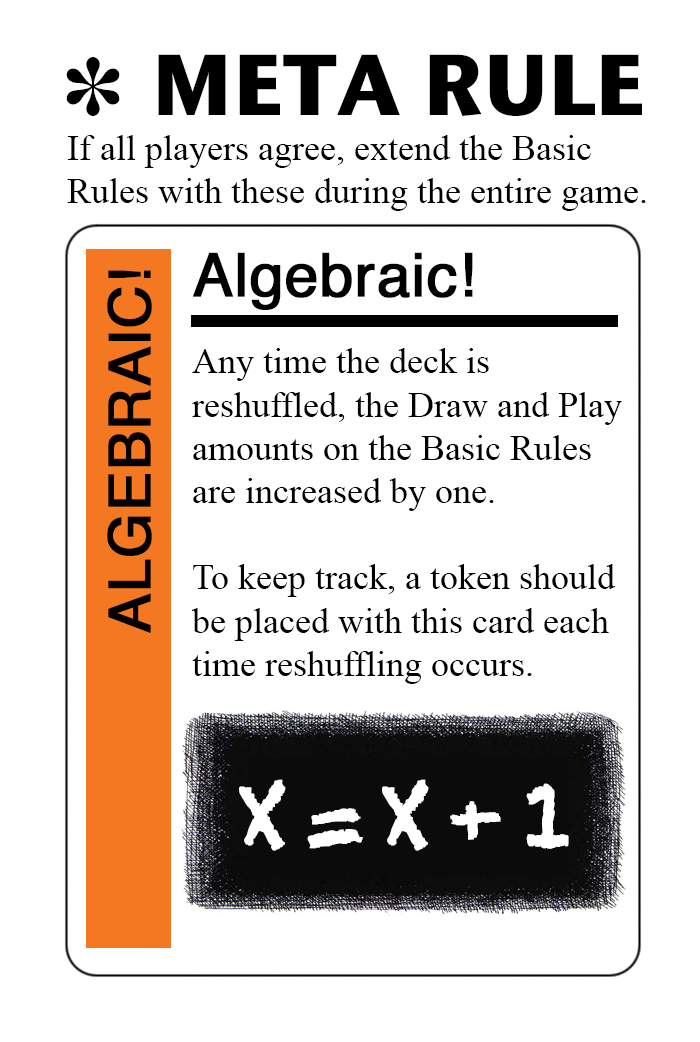
<style>
.page{position:relative;width:700px;height:1042px;background:#ffffff}
.page>*{position:absolute;margin:0}
.t1{font:86px "StoneSansITC-Bold";color:#000000}
.t2{font:82px "MS-Gothic";color:#000000}
.t3{font:36px "TimesNewRomanPSMT";color:#000000}
.t4{font:60px "Helvetica";color:#000000;font-weight:bold}
.t5{font:58px "Helvetica";color:#000000;font-weight:bold}
.t6{font:80.4px "Chalkduster";letter-spacing:-0.15em;color:#ffffff;font-weight:bold}
.t7{font:88.4px "Chalkduster";letter-spacing:-0.15em;color:#ffffff;font-weight:bold}
</style>
<div class="page">
<p class="t1" style="left:158px;top:54px;width:484px;height:62px">META RULE</p>
<p class="t2" style="left:66px;top:57px;width:54px;height:59px">✽</p>
<p class="t3" style="left:67px;top:135px;width:579px;height:76px">If all players agree, extend the Basic <br>Rules with these during the entire game.</p>
<p class="t4" style="left:193px;top:252px;width:280px;height:58px">Algebraic!</p>
<p class="t5" style="left:107px;top:270px;width:45px;height:363px;rotate:-90deg">ALGEBRAIC!</p>
<p class="t3" style="left:191px;top:348px;width:431px;height:336px">Any time the deck is<br>reshuffled, the Draw and Play<br>amounts on the Basic Rules<br>are increased by one.<br><br>To keep track, a token should<br>be placed with this card each<br>time reshuffling occurs.</p>
<p class="t6" style="left:239px;top:779px;width:330px;height:72px">X = X + <span class="t7">1</span></p>
</div>
